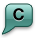
<style>
.page{position:relative;width:38px;height:38px;background:#ffffff}
.page>*{position:absolute;margin:0}
.t1{font:15.9px "HelveticaNeue-Bold";color:#000000}
</style>
<div class="page">
<p class="t1" style="left:13px;top:8px;width:11px;height:13px">C</p>
</div>
